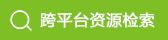
<style>
.page{position:relative;width:168px;height:40px;background:#7fbf26}
.page>*{position:absolute;margin:0}
.t1{font:16px "FZLTHK--GBK1-0";color:#ffffff;font-weight:bold}
</style>
<div class="page">
<p class="t1" style="left:40px;top:12px;width:115px;height:16px">跨平台资源检索</p>
</div>
